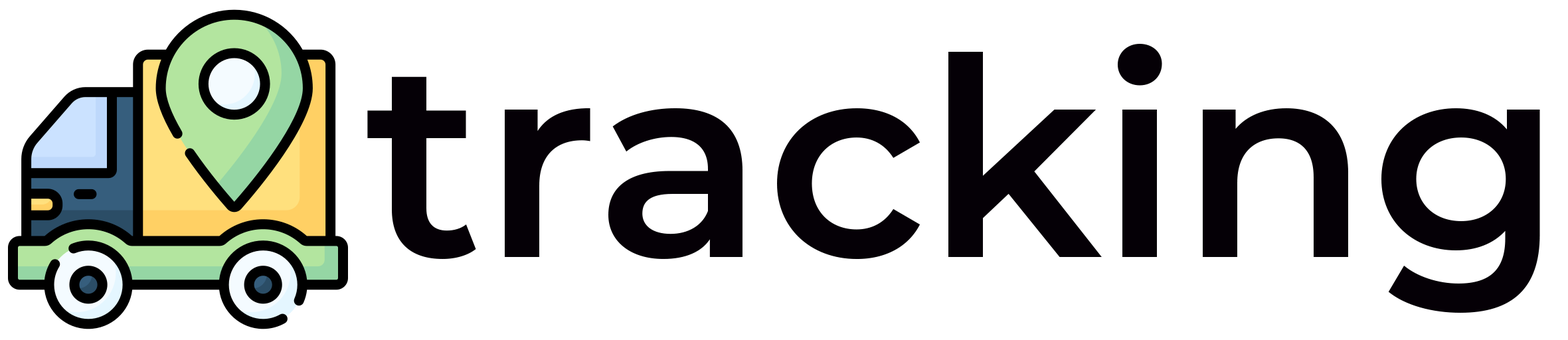
<style>
.page{position:relative;width:1568px;height:340px;background:#ffffff}
.page>*{position:absolute;margin:0}
.t1{font:276.2px "Montserrat-SemiBold";color:#050006}
</style>
<div class="page">
<p class="t1" style="left:367px;top:44px;width:1173px;height:269px">tracking</p>
</div>
